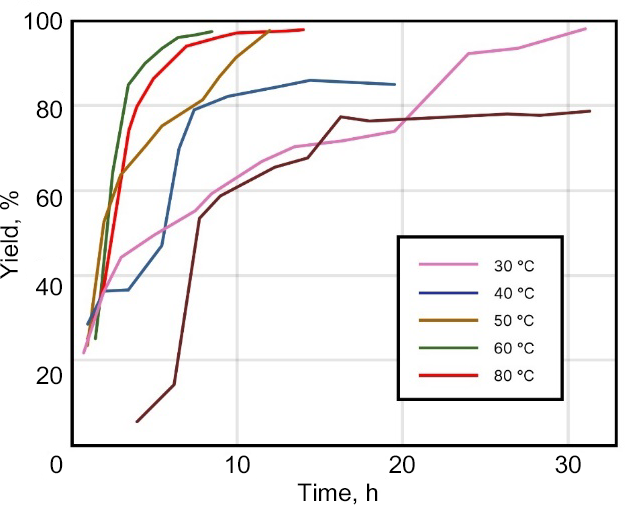
<style>
.page{position:relative;width:625px;height:505px;background:#ffffff}
.page>*{position:absolute;margin:0}
.t1{font:24.4px "ArialUnicodeMS";color:#000000}
</style>
<div class="page">
<p class="t1" style="left:24px;top:12px;width:38px;height:373px;text-align:right">100<br>80<br>60<br>40<br>20</p>
<p class="t1" style="left:0px;top:191px;width:22px;height:88px;rotate:-90deg">Yield, %</p>
<p class="t1" style="left:50px;top:455px;width:13px;height:19px">0</p>
<p class="t1" style="left:226px;top:455px;width:24px;height:19px">10</p>
<p class="t1" style="left:389px;top:455px;width:26px;height:19px">20</p>
<p class="t1" style="left:555px;top:455px;width:26px;height:19px">30</p>
<p class="t1" style="left:297px;top:483px;width:81px;height:22px">Time, h</p>
</div>
